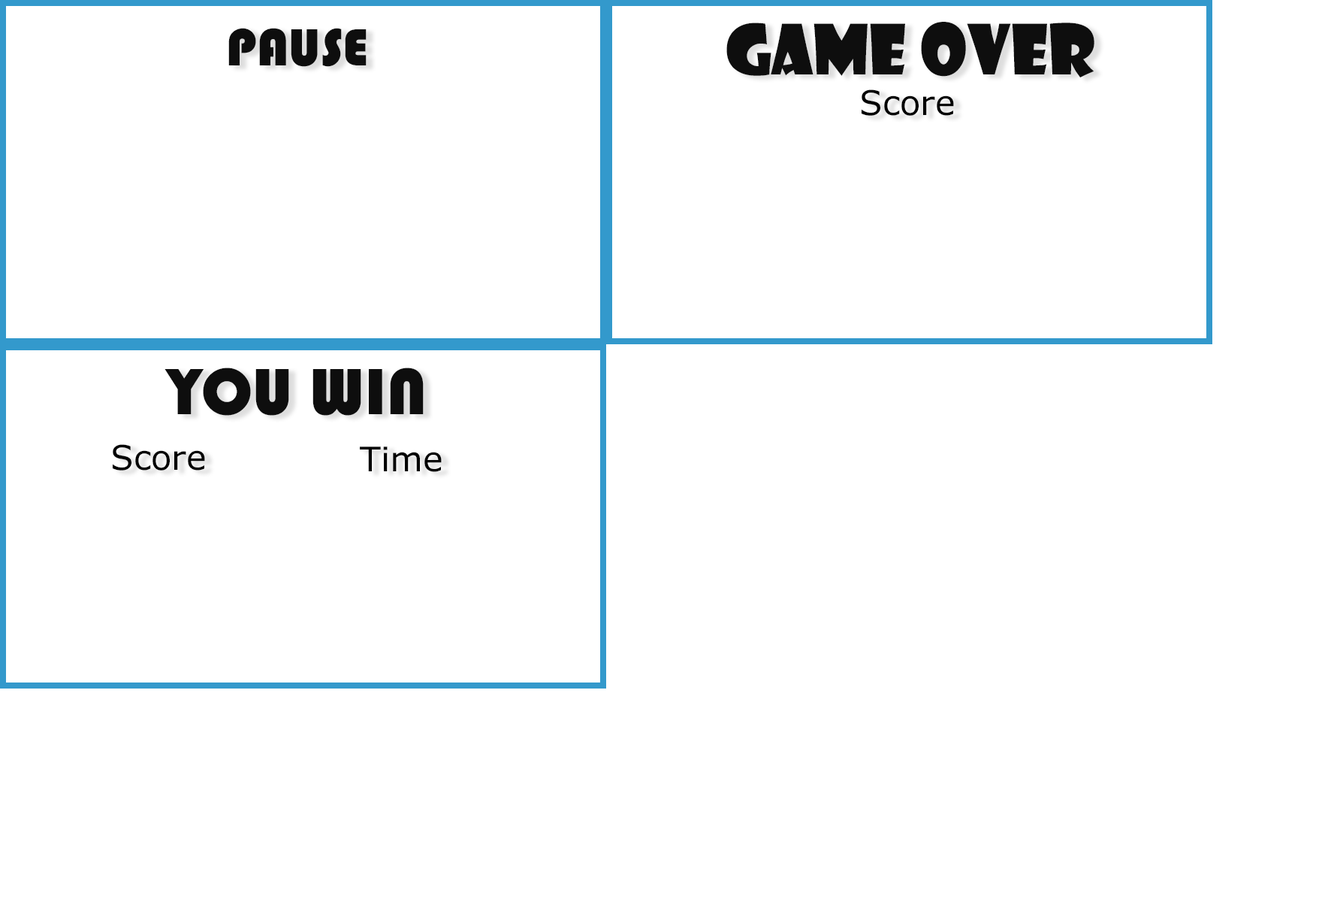
<style>
.page{position:relative;width:1322px;height:902px;background:#ffffff}
.page>*{position:absolute;margin:0}
.t1{font:54.1px "Bauhaus93";color:#000000}
.t2{font:67.6px "ShowcardGothic-Reg";color:#000000}
.t3{font:33.8px "MSReferenceSansSerif";color:#000000}
.t4{font:67.6px "Bauhaus93";color:#000000}
</style>
<div class="page">
<p class="t1" style="left:228px;top:28px;width:139px;height:39px">PAUSE</p>
<p class="t2" style="left:727px;top:22px;width:368px;height:55px">Game Over</p>
<p class="t3" style="left:862px;top:89px;width:92px;height:27px">Score</p>
<p class="t4" style="left:165px;top:367px;width:259px;height:49px">YOU WIN</p>
<p class="t3" style="left:113px;top:444px;width:92px;height:26px">Score</p>
<p class="t3" style="left:360px;top:446px;width:82px;height:26px">Time</p>
</div>
